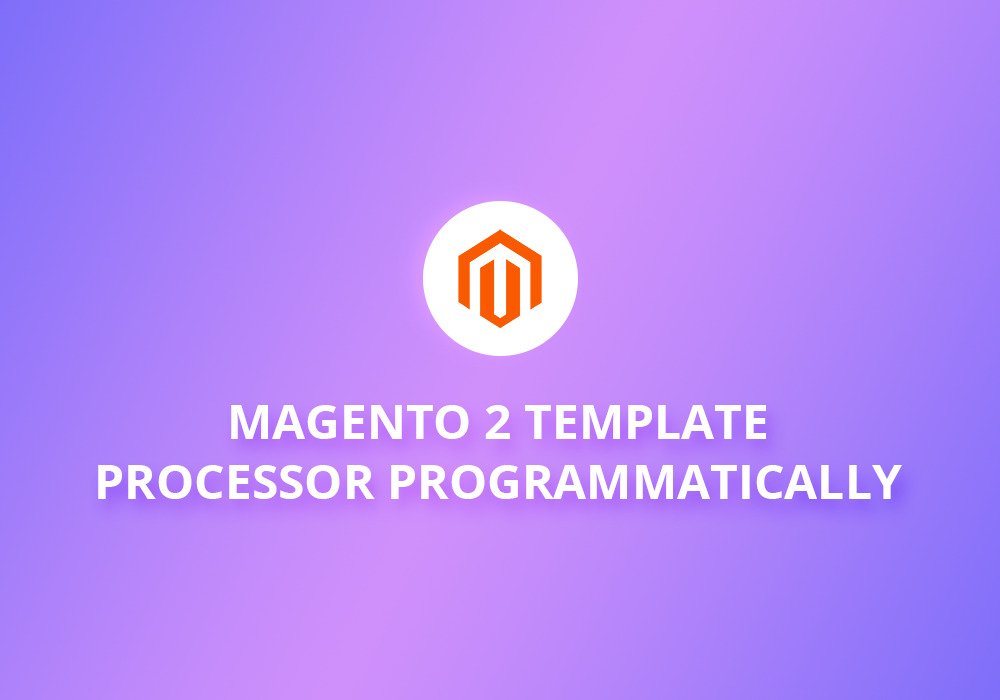
<style>
.page{position:relative;width:1000px;height:700px}
.page>*{position:absolute;margin:0}
.t1{font:48px/60px "OpenSans-Bold";color:#ffffff;text-transform:uppercase}
</style>
<div class="page">
<p class="t1" style="left:98px;top:405px;width:804px;height:94px;text-align:center">magento 2 template<br>processor programmatically</p>
</div>
